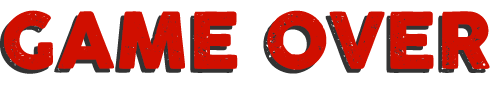
<style>
.page{position:relative;width:490px;height:85px;background:#ffffff}
.page>*{position:absolute;margin:0}
.t1{font:76.2px "COCOGOOSELETTERPRESS";color:#d00f00;text-transform:uppercase}
</style>
<div class="page">
<p class="t1" style="left:4px;top:10px;width:486px;height:60px">Game Over</p>
</div>
